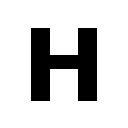
<style>
.page{position:relative;width:128px;height:128px;background:#ffffff}
.page>*{position:absolute;margin:0}
.t1{font:100px "Verdana-Bold";color:#000000}
</style>
<div class="page">
<p class="t1" style="left:31px;top:28px;width:66px;height:73px">H</p>
</div>
